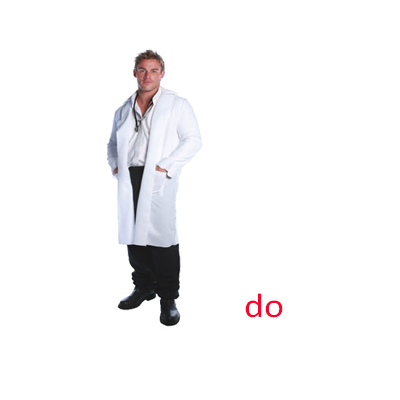
<style>
.page{position:relative;width:400px;height:400px;background:#ffffff}
.page>*{position:absolute;margin:0}
.t1{font:34.7px "Calibri";color:#fb032c;scale:1.09 1}
</style>
<div class="page">
<p class="t1" style="left:245px;top:293px;width:38px;height:25px">do</p>
</div>
